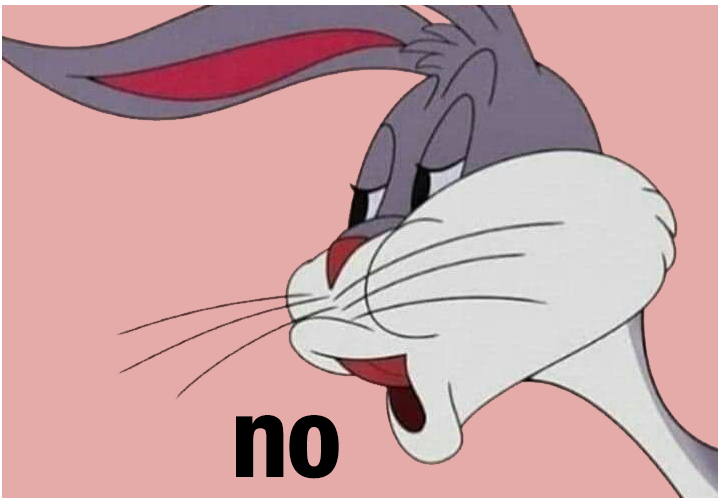
<style>
.page{position:relative;width:720px;height:503px;background:#e5aba9}
.page>*{position:absolute;margin:0}
.t1{font:123px "FranklinGothic-DemiCond";letter-spacing:-0.01em;color:#000000}
</style>
<div class="page">
<p class="t1" style="left:236px;top:415px;width:103px;height:64px">no</p>
</div>
